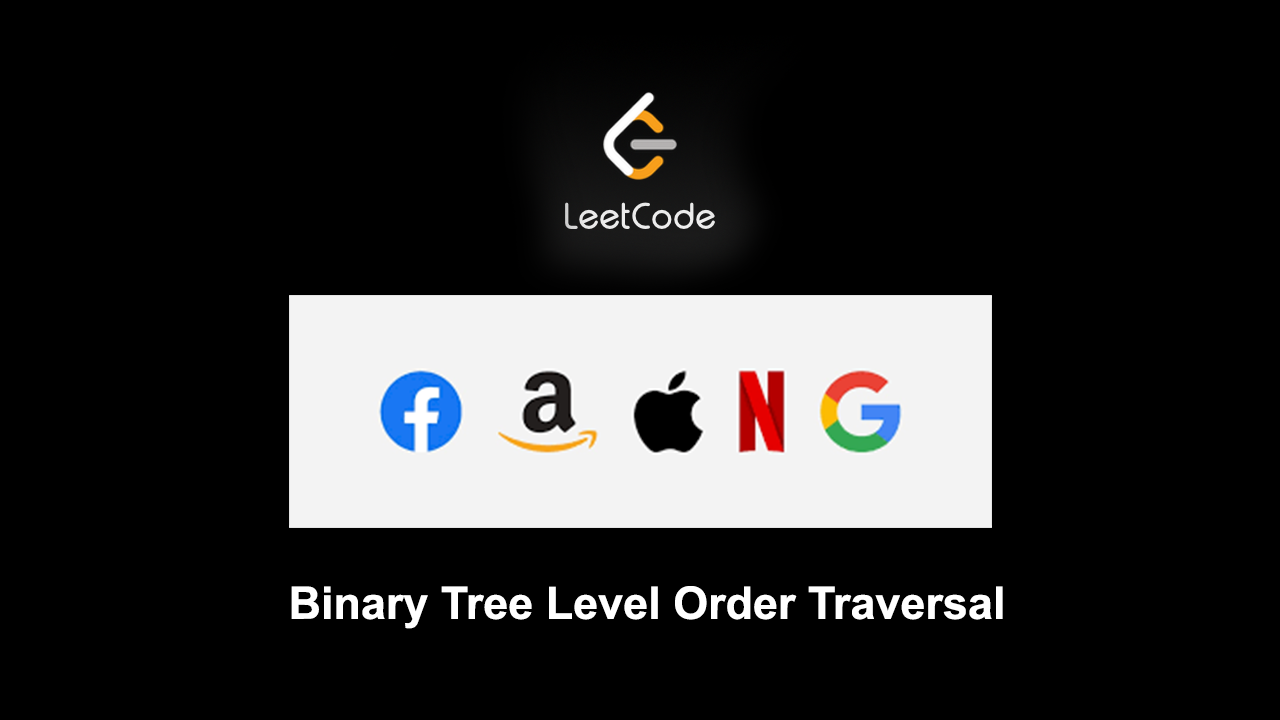
<style>
.page{position:relative;width:1280px;height:720px;background:#000000}
.page>*{position:absolute;margin:0}
.t1{font:44.9px "Arial-BoldMT";color:#ffffff}
</style>
<div class="page">
<p class="t1" style="left:291px;top:586px;width:712px;height:43px">Binary Tree Level Order Traversal</p>
</div>
